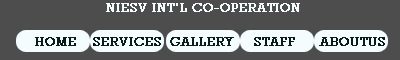
<style>
.page{position:relative;width:400px;height:60px;background:#4d4d4d}
.page>*{position:absolute;margin:0}
.t1{font:13px "Rockwell";color:#f4fcfd;text-transform:uppercase;font-weight:bold}
.t2{font:13px "Rockwell";color:#081b1d;text-transform:uppercase;font-weight:bold}
</style>
<div class="page">
<p class="t1" style="left:106px;top:3px;width:194px;height:9px">NIESV INT’L CO-OPERATION</p>
<p class="t2" style="left:35px;top:37px;width:350px;height:9px">HOME    SERVICES  GALLERY     STAFF      ABOUTUS</p>
</div>
